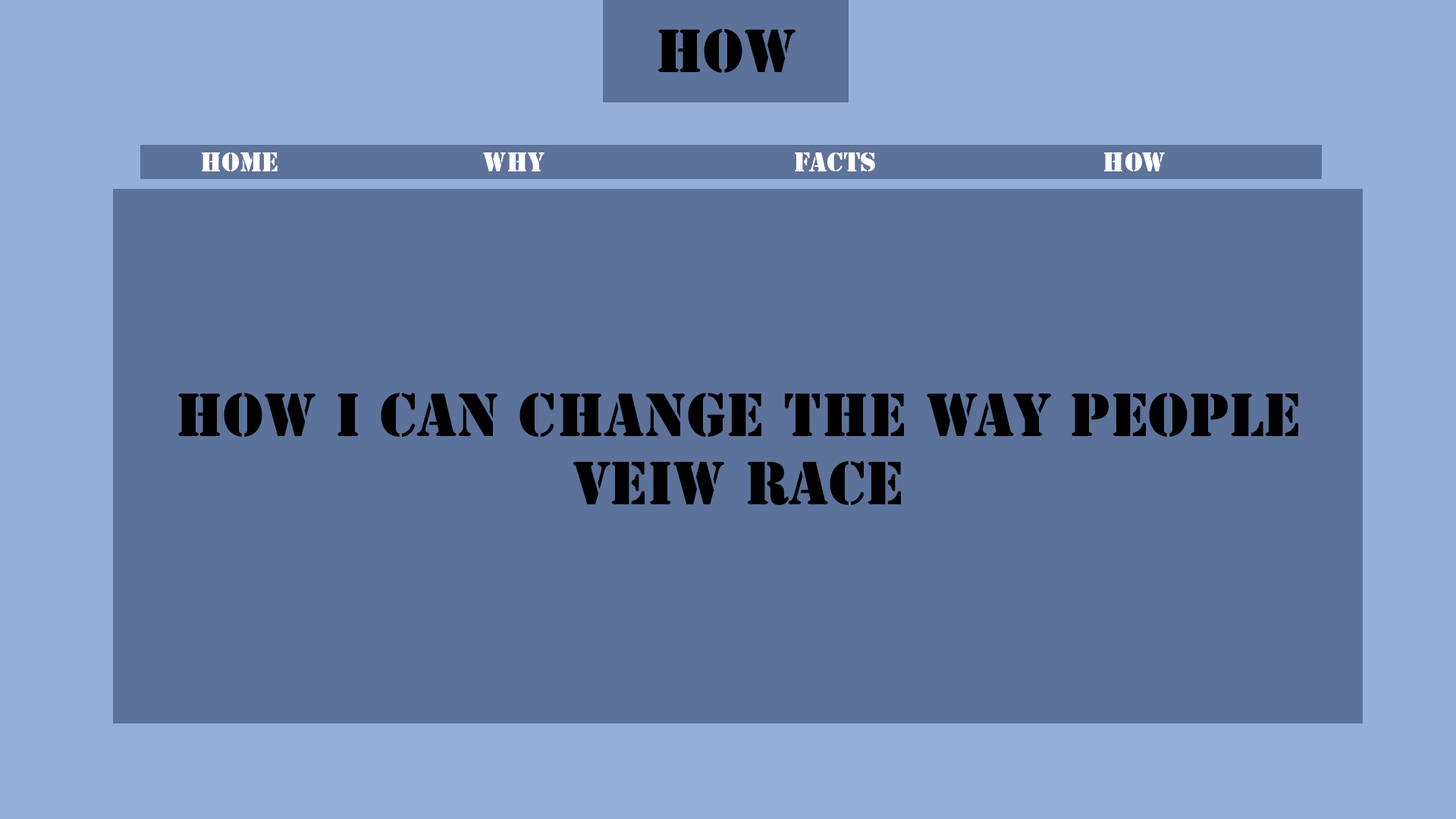
<style>
.page{position:relative;width:1456px;height:819px;background:#5d729a}
.page>*{position:absolute;margin:0}
.t1{font:56.9px "StencilStd";color:#000000}
.t2{font:25.3px "StencilStd";color:#ffffff}
</style>
<div class="page">
<p class="t1" style="left:658px;top:29px;width:137px;height:44px">How</p>
<p class="t2" style="left:202px;top:152px;width:76px;height:19px">Home</p>
<p class="t2" style="left:483px;top:152px;width:61px;height:19px">Why</p>
<p class="t2" style="left:795px;top:152px;width:80px;height:19px">Facts</p>
<p class="t2" style="left:1104px;top:152px;width:61px;height:19px">How</p>
<p class="t1" style="left:178px;top:393px;width:1120px;height:112px;text-align:center">How I can change the way people veiw race</p>
</div>
